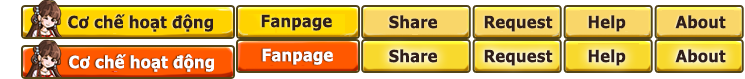
<style>
.page{position:relative;width:745px;height:79px}
.page>*{position:absolute;margin:0}
.t1{font:16.8px "Verdana-Bold";color:#311e18;scale:0.9 1}
.t2{font:16.8px "Verdana-Bold";color:#fffefe;scale:0.9 1}
</style>
<div class="page">
<p class="t1" style="left:68px;top:14px;width:145px;height:18px">Cơ chế hoạt động</p>
<p class="t1" style="left:261px;top:14px;width:71px;height:17px">Fanpage</p>
<p class="t1" style="left:389px;top:15px;width:48px;height:14px">Share</p>
<p class="t1" style="left:484px;top:15px;width:69px;height:17px">Request</p>
<p class="t1" style="left:588px;top:15px;width:38px;height:17px">Help</p>
<p class="t1" style="left:675px;top:15px;width:51px;height:14px">About</p>
<p class="t2" style="left:69px;top:54px;width:145px;height:18px">Cơ chế hoạt động</p>
<p class="t2" style="left:262px;top:48px;width:71px;height:17px">Fanpage</p>
<p class="t1" style="left:389px;top:49px;width:48px;height:14px">Share</p>
<p class="t1" style="left:484px;top:49px;width:69px;height:17px">Request</p>
<p class="t1" style="left:588px;top:49px;width:38px;height:17px">Help</p>
<p class="t1" style="left:675px;top:49px;width:51px;height:14px">About</p>
</div>
